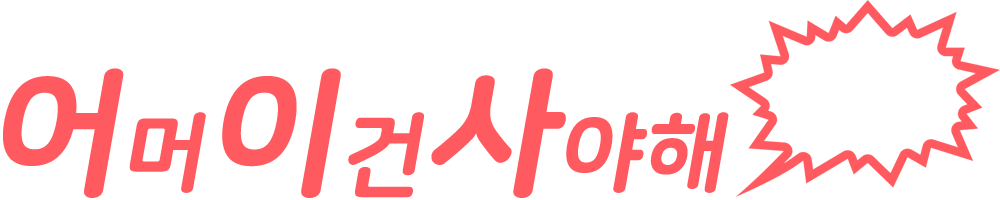
<style>
.page{position:relative;width:1000px;height:200px;background:#ffffff}
.page>*{position:absolute;margin:0}
.t1{font:92px "NanumSquareRoundEB";color:#ff5a5f;font-style:italic}
.t2{font:148px "NanumSquareRoundEB";color:#ff5a5f;font-style:italic}
</style>
<div class="page">
<p class="t1" style="left:3px;top:68px;width:726px;height:130px"><span class="t2">어</span>머<span class="t2">이</span>건<span class="t2">사</span>야해</p>
</div>
